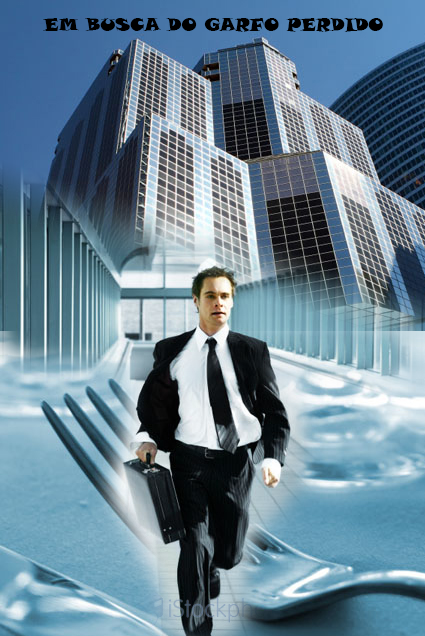
<style>
.page{position:relative;width:425px;height:636px}
.page>*{position:absolute;margin:0}
.t1{font:18px "SnapITC-Regular";color:#000000}
</style>
<div class="page">
<p class="t1" style="left:43px;top:18px;width:340px;height:14px">EM BUSCA DO GARFO PERDIDO</p>
</div>
